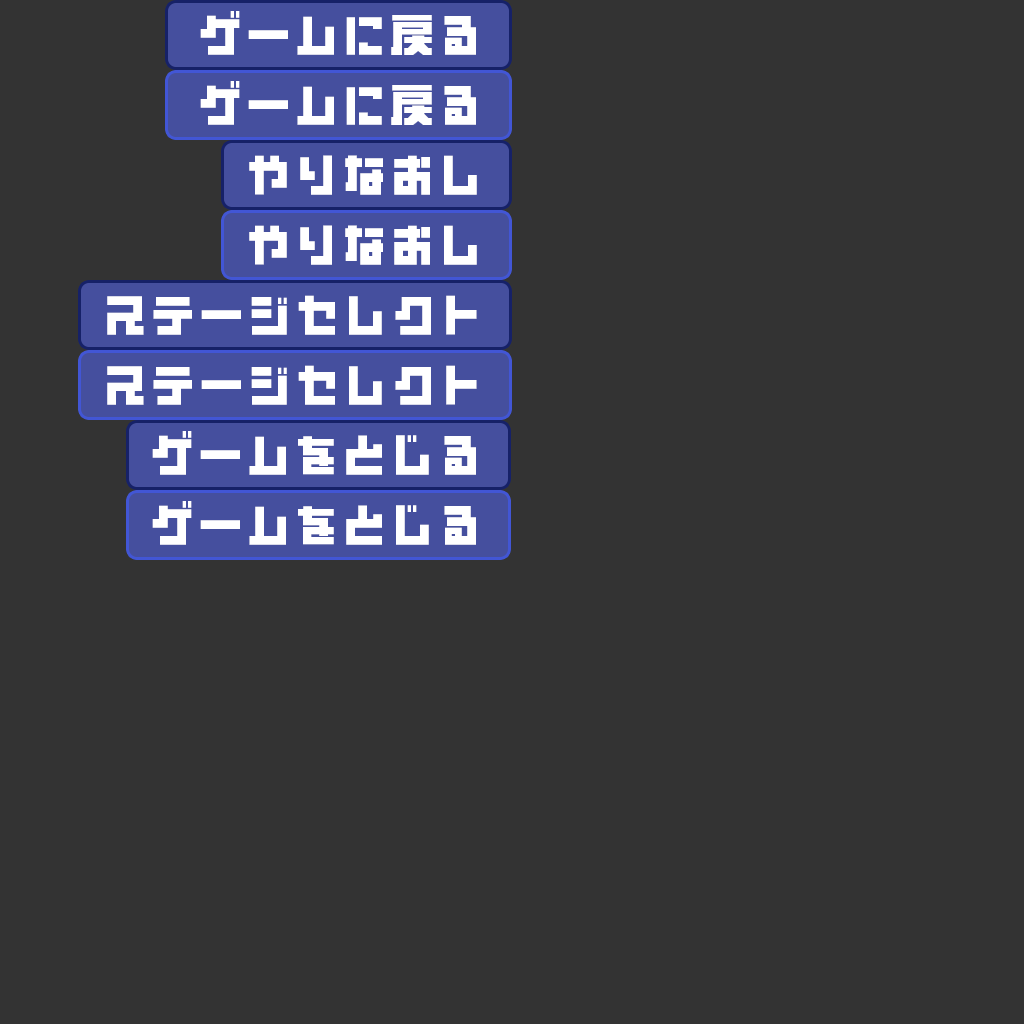
<style>
.page{position:relative;width:1024px;height:1024px;background:#333333}
.page>*{position:absolute;margin:0}
.t1{font:48px "ABDON-Bold";color:#ffffff}
</style>
<div class="page">
<p class="t1" style="left:200px;top:11px;width:276px;height:44px">ゲームに戻る</p>
<p class="t1" style="left:200px;top:81px;width:276px;height:44px">ゲームに戻る</p>
<p class="t1" style="left:249px;top:155px;width:228px;height:40px">やりなおし</p>
<p class="t1" style="left:249px;top:225px;width:228px;height:40px">やりなおし</p>
<p class="t1" style="left:107px;top:295px;width:370px;height:40px">ステージセレクト</p>
<p class="t1" style="left:107px;top:365px;width:370px;height:40px">ステージセレクト</p>
<p class="t1" style="left:152px;top:431px;width:324px;height:44px">ゲームをとじる</p>
<p class="t1" style="left:152px;top:501px;width:324px;height:44px">ゲームをとじる</p>
</div>
